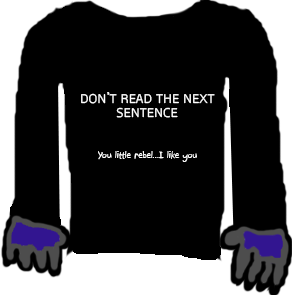
<style>
.page{position:relative;width:292px;height:295px;background:#000000}
.page>*{position:absolute;margin:0}
.t1{font:12px "WascoSans";color:#ffffff}
.t2{font:12px "SybilGreen";color:#ffffff}
.t3{font:9.9px "Boopee";color:#ffffff;scale:1.31 1}
</style>
<div class="page">
<p class="t1" style="left:81px;top:92px;width:134px;height:26px">DON<span class="t2">’</span>T READ THE NEXT<br> SENTENCE</p>
<p class="t3" style="left:98px;top:151px;width:99px;height:11px">You little rebel...I like you</p>
</div>
